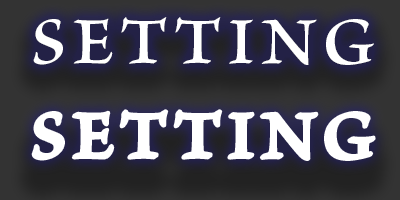
<style>
.page{position:relative;width:400px;height:200px}
.page>*{position:absolute;margin:0}
.t1{font:70px "TpldYiFengScripture";letter-spacing:0.1em;color:#ffffff;text-transform:uppercase}
</style>
<div class="page">
<p class="t1" style="left:33px;top:17px;width:341px;height:48px">setting</p>
<p class="t1" style="left:33px;top:111px;width:341px;height:48px">setting</p>
</div>
